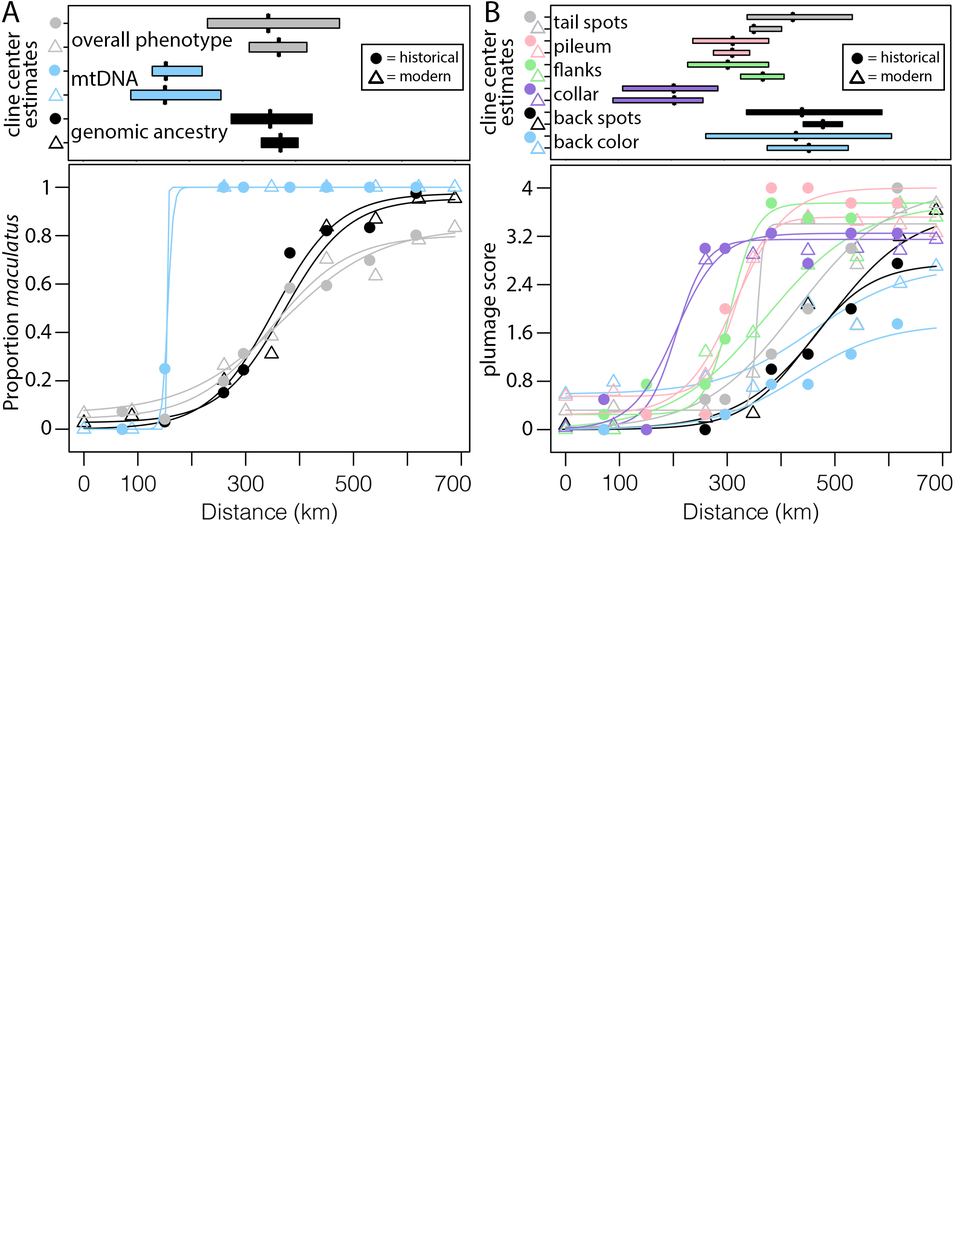
<style>
.page{position:relative;width:960px;height:1242px;background:#ffffff}
.page>*{position:absolute;margin:0}
.t1{font:31.4px "MyriadPro-Regular";color:#000000}
.t2{font:19.9px "MyriadPro-Regular";color:#000000}
.t3{font:22px "MyriadPro-Regular";color:#000000}
.t4{font:21.2px "MyriadPro-Regular";color:#000000}
.t5{font:22px "MyriadPro-It";color:#000000}
</style>
<div class="page">
<p class="t1" style="left:2px;top:1px;width:18px;height:21px">A</p>
<p class="t1" style="left:486px;top:1px;width:14px;height:21px">B</p>
<p class="t2" style="left:553px;top:14px;width:88px;height:134px">tail spots<br>pileum<br>flanks<br>collar<br>back spots<br>back color</p>
<p class="t3" style="left:480px;top:30px;width:16px;height:104px;rotate:-90deg">cline center</p>
<p class="t3" style="left:4px;top:32px;width:16px;height:105px;rotate:-90deg">cline center</p>
<p class="t3" style="left:22px;top:41px;width:15px;height:87px;rotate:-90deg">estimates</p>
<p class="t4" style="left:72px;top:31px;width:160px;height:20px">overall phenotype</p>
<p class="t3" style="left:498px;top:39px;width:15px;height:86px;rotate:-90deg">estimates</p>
<p class="t3" style="left:72px;top:71px;width:66px;height:15px">mtDNA</p>
<p class="t4" style="left:72px;top:124px;width:156px;height:19px">genomic ancestry</p>
<p class="t3" style="left:26px;top:180px;width:26px;height:255px;text-align:right">1<br> <br>0.8<br> <br>0.6<br> <br>0.4<br> <br>0.2<br> <br>0</p>
<p class="t3" style="left:507px;top:181px;width:26px;height:255px;text-align:right">4<br> <br>3.2<br> <br>2.4<br> <br>1.6<br> <br>0.8<br> <br>0</p>
<p class="t3" style="left:2px;top:215px;width:21px;height:195px;rotate:-90deg">Proportion <span class="t5">maculatus</span></p>
<p class="t3" style="left:480px;top:243px;width:20px;height:133px;rotate:-90deg">plumage score</p>
</div>
